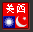
<style>
.page{position:relative;width:33px;height:32px;background:#333333}
.page>*{position:absolute;margin:0}
.t1{font:10.4px "SimSun";color:#ffffff}
</style>
<div class="page">
<p class="t1" style="left:6px;top:4px;width:19px;height:9px">美西</p>
</div>
